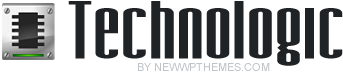
<style>
.page{position:relative;width:343px;height:72px;background:#ffffff}
.page>*{position:absolute;margin:0}
.t1{font:72px "SFIronGothicExtended";letter-spacing:0.025em;color:#202326}
.t2{font:11px "ArialMT";color:#bfc4c8;text-transform:uppercase}
</style>
<div class="page">
<p class="t1" style="left:68px;top:1px;width:275px;height:65px">Technologic</p>
<p class="t2" style="left:138px;top:63px;width:132px;height:8px">by NewWpThemes.com</p>
</div>
